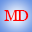
<style>
.page{position:relative;width:32px;height:32px}
.page>*{position:absolute;margin:0}
.t1{font:16px "Georgia";color:#ff0000}
</style>
<div class="page">
<p class="t1" style="left:4px;top:10px;width:15px;height:11px">M</p>
<p class="t1" style="left:17px;top:10px;width:12px;height:11px">D</p>
</div>
